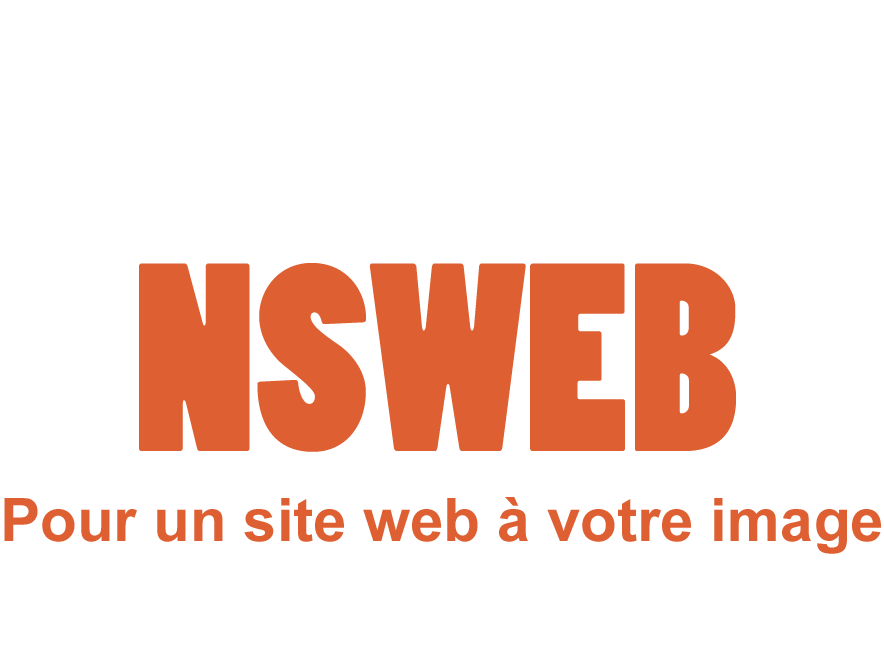
<style>
.page{position:relative;width:884px;height:652px;background:#ffffff}
.page>*{position:absolute;margin:0}
.t1{font:250px "PoplarStd";color:#dd5f32}
.t2{font:60px "Arial-BoldMT";color:#dd5f32}
</style>
<div class="page">
<p class="t1" style="left:139px;top:263px;width:597px;height:189px">NSWEB</p>
<p class="t2" style="left:4px;top:497px;width:877px;height:57px">Pour un site web à votre image</p>
</div>
